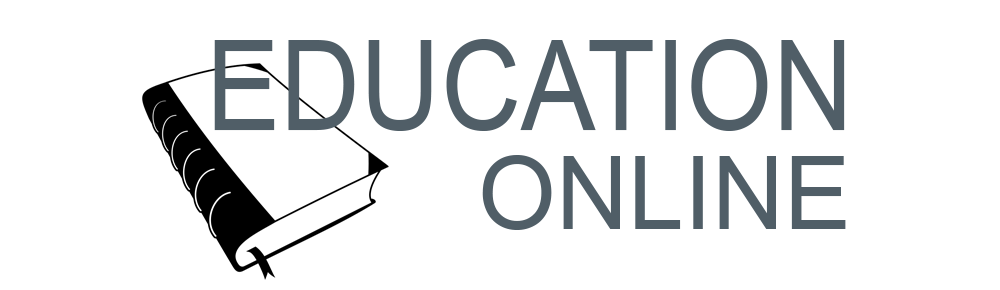
<style>
.page{position:relative;width:1000px;height:290px;background:#ffffff}
.page>*{position:absolute;margin:0}
.t1{font:124.8px "ArialMT";color:#505e67;scale:0.89 1}
.t2{font:102px "ArialMT";color:#505e67}
</style>
<div class="page">
<p class="t1" style="left:214px;top:39px;width:631px;height:92px">EDUCATION</p>
<p class="t2" style="left:482px;top:155px;width:364px;height:75px">ONLINE</p>
</div>
